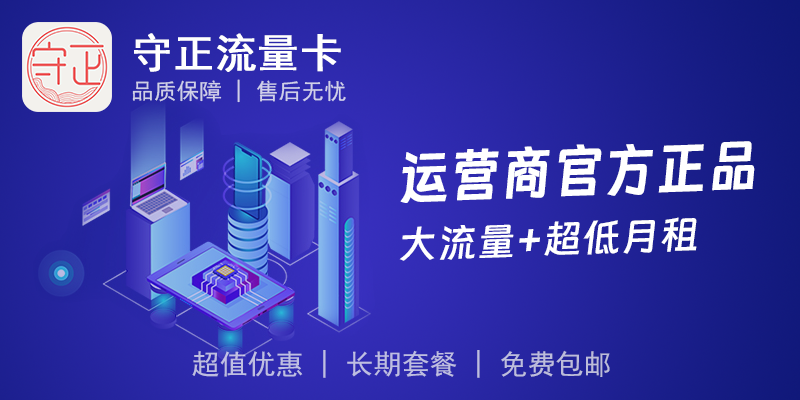
<style>
.page{position:relative;width:800px;height:400px}
.page>*{position:absolute;margin:0}
.t1{font:40.9px "SimHei";color:#ffffff;font-weight:bold}
.t2{font:22.6px "SimHei";color:#d0cfe8}
.t3{font:58.7px "DingTalk-JinBuTi";color:#ffffff;font-weight:bold;scale:0.86 1}
.t4{font:39.3px "DingTalk-JinBuTi";color:#ffffff}
.t5{font:28px "SimHei";color:#bebde0}
</style>
<div class="page">
<p class="t1" style="left:134px;top:33px;width:207px;height:39px">守正流量卡</p>
<p class="t2" style="left:132px;top:79px;width:214px;height:24px">品质保障 | 售后无忧</p>
<p class="t3" style="left:400px;top:141px;width:355px;height:62px;rotate:-2deg">运营商官方正品</p>
<p class="t4" style="left:399px;top:217px;width:298px;height:44px;rotate:-2deg">大流量+超低月租</p>
<p class="t5" style="left:192px;top:350px;width:418px;height:28px">超值优惠 | 长期套餐 | 免费包邮</p>
</div>
